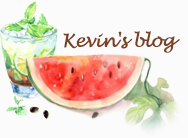
<style>
.page{position:relative;width:188px;height:138px;background:#fbfbfb}
.page>*{position:absolute;margin:0}
.t1{font:18px "LucidaHandwriting-Italic";letter-spacing:-0.05em;color:#7b4125;font-weight:bold}
</style>
<div class="page">
<p class="t1" style="left:63px;top:31px;width:117px;height:22px">Kevin's blog</p>
</div>
